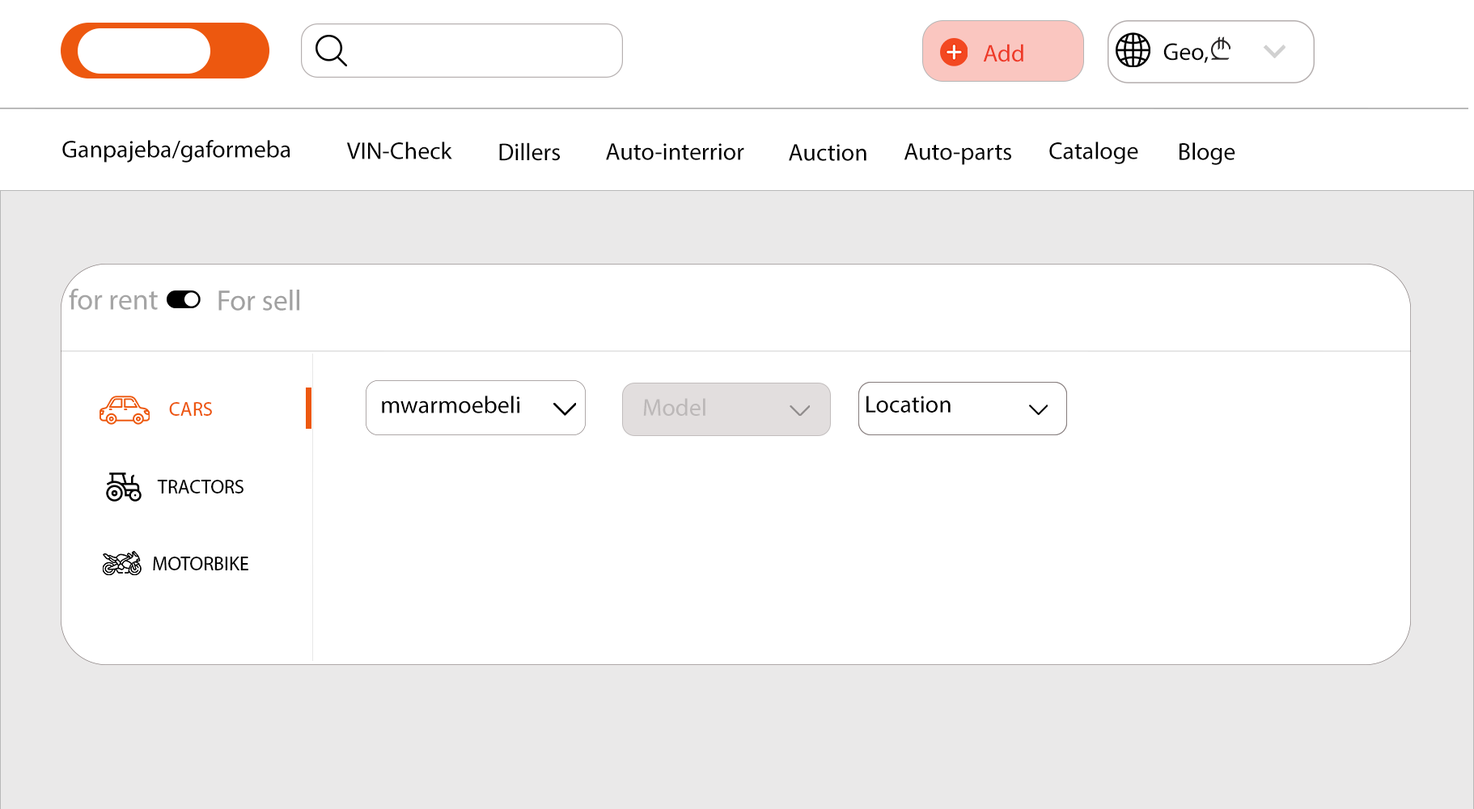
<style>
.page{position:relative;width:1474px;height:809px;background:#ffffff}
.page>*{position:absolute;margin:0}
.t1{font:24.3px "MyriadPro-Regular";color:#ee3926}
.t2{font:24.3px "MyriadPro-Regular";color:#000000}
.t3{font:29.1px "MyriadPro-Regular";color:#a5a5a5}
.t4{font:29.1px "MyriadPro-Regular";color:#a1a1a1}
.t5{font:24.3px "MyriadPro-Regular";color:#bcb8b8}
.t6{font:19.4px "MyriadPro-Regular";color:#ed580f}
.t7{font:19.4px "MyriadPro-Regular";color:#000000}
</style>
<div class="page">
<p class="t1" style="left:983px;top:44px;width:40px;height:18px">Add</p>
<p class="t2" style="left:1163px;top:43px;width:46px;height:20px">Geo,</p>
<p class="t2" style="left:62px;top:140px;width:228px;height:23px">Ganpajeba/gaformeba</p>
<p class="t2" style="left:346px;top:142px;width:106px;height:17px">VIN-Check</p>
<p class="t2" style="left:499px;top:142px;width:61px;height:19px">Dillers</p>
<p class="t2" style="left:606px;top:143px;width:138px;height:17px">Auto-interrior</p>
<p class="t2" style="left:789px;top:144px;width:77px;height:17px">Auction</p>
<p class="t2" style="left:904px;top:143px;width:107px;height:22px">Auto-parts</p>
<p class="t2" style="left:1049px;top:142px;width:89px;height:22px">Cataloge</p>
<p class="t2" style="left:1180px;top:142px;width:55px;height:23px">Bloge</p>
<p class="t3" style="left:69px;top:288px;width:89px;height:22px">for rent</p>
<p class="t4" style="left:218px;top:290px;width:81px;height:21px">For sell</p>
<p class="t2" style="left:382px;top:396px;width:137px;height:17px">mwarmoebeli</p>
<p class="t5" style="left:643px;top:398px;width:62px;height:18px">Model</p>
<p class="t2" style="left:866px;top:396px;width:85px;height:17px">Location</p>
<p class="t6" style="left:169px;top:402px;width:43px;height:14px">CARS</p>
<p class="t7" style="left:157px;top:480px;width:87px;height:13px">TRACTORS</p>
<p class="t7" style="left:153px;top:557px;width:95px;height:13px">MOTORBIKE</p>
</div>
